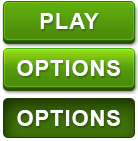
<style>
.page{position:relative;width:138px;height:141px}
.page>*{position:absolute;margin:0}
.t1{font:21.7px "Arial-BoldMT";letter-spacing:0.05em;color:#ffffff;text-transform:uppercase}
</style>
<div class="page">
<p class="t1" style="left:40px;top:13px;width:59px;height:16px">play</p>
<p class="t1" style="left:17px;top:60px;width:103px;height:16px">options</p>
<p class="t1" style="left:17px;top:110px;width:103px;height:16px">options</p>
</div>
